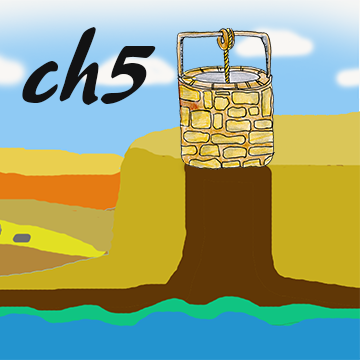
<style>
.page{position:relative;width:360px;height:360px}
.page>*{position:absolute;margin:0}
.t1{font:109px "ARBERKLEY";color:#121213;scale:0.95 1}
</style>
<div class="page">
<p class="t1" style="left:22px;top:27px;width:134px;height:78px">ch5</p>
</div>
